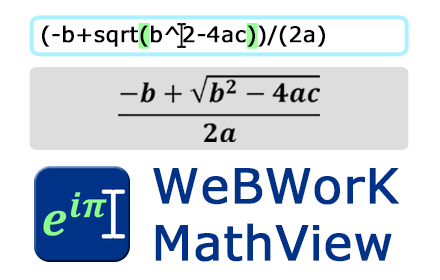
<style>
.page{position:relative;width:440px;height:280px;background:#ffffff}
.page>*{position:absolute;margin:0}
.t1{font:21.7px "Verdana";color:#000000;font-weight:bold}
.t2{font:48px "Verdana";color:#003388;font-weight:bold}
</style>
<div class="page">
<p class="t1" style="left:42px;top:25px;width:283px;height:22px">(-b+sqrt(b^2-4ac))/(2a)</p>
<p class="t2" style="left:153px;top:168px;width:246px;height:94px">WeBWorK<br>MathView</p>
</div>
